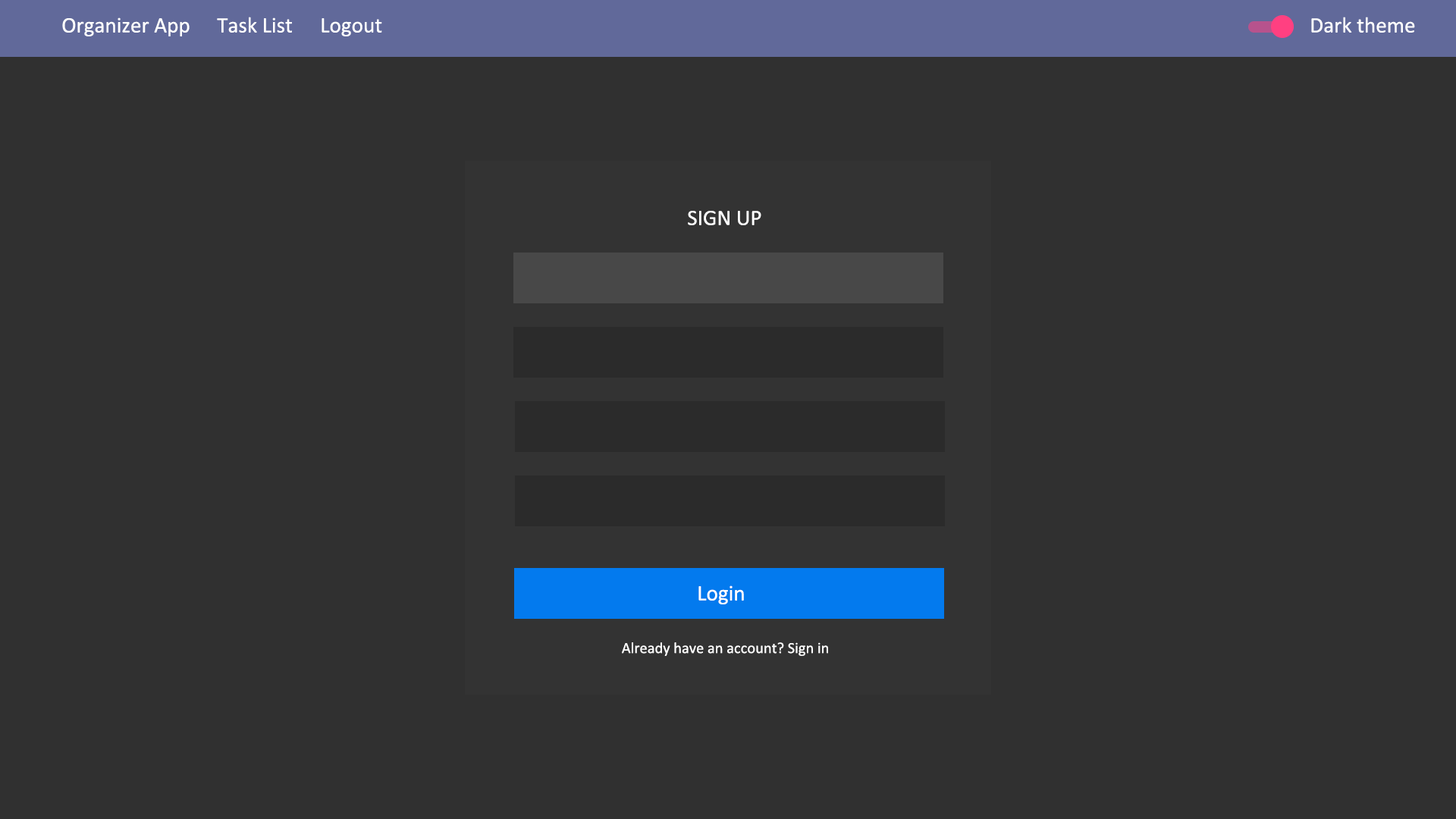
<style>
.page{position:relative;width:1456px;height:819px;background:#303030}
.page>*{position:absolute;margin:0}
.t1{font:22.1px "Calibri";color:#ffffff}
.t2{font:15.6px "Calibri";color:#ffffff}
</style>
<div class="page">
<p class="t1" style="left:62px;top:17px;width:128px;height:19px">Organizer App</p>
<p class="t1" style="left:217px;top:17px;width:75px;height:16px">Task List</p>
<p class="t1" style="left:1311px;top:17px;width:104px;height:16px">Dark theme</p>
<p class="t1" style="left:322px;top:18px;width:60px;height:18px">Logout</p>
<p class="t1" style="left:688px;top:211px;width:73px;height:14px">SIGN UP</p>
<p class="t1" style="left:698px;top:585px;width:46px;height:19px">Login</p>
<p class="t2" style="left:622px;top:642px;width:206px;height:14px">Already have an account? Sign in</p>
</div>
